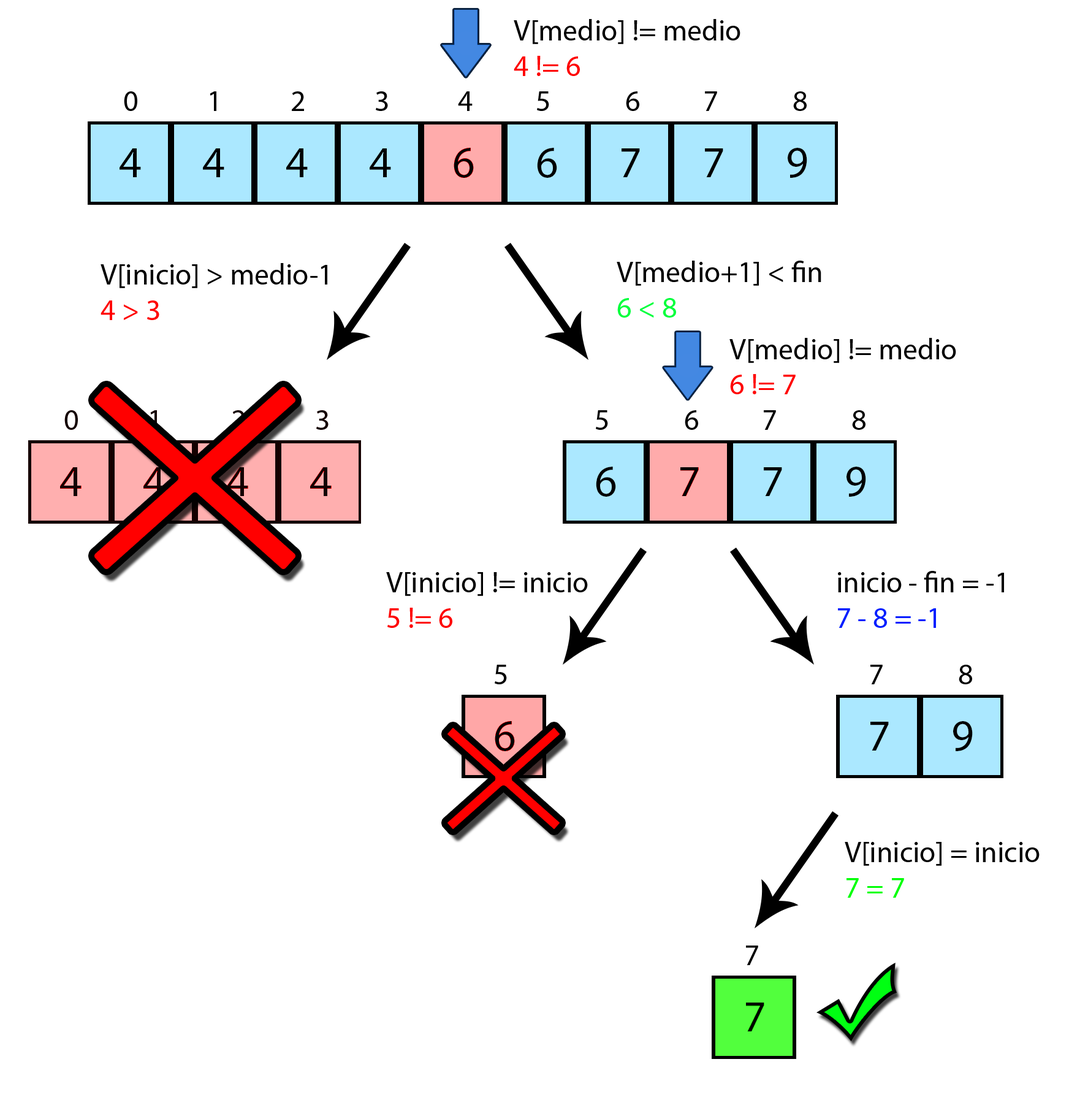
<style>
.page{position:relative;width:1069px;height:1116px;background:#ffffff}
.page>*{position:absolute;margin:0}
.t1{font:29.4px "MyriadPro-Regular";color:#000000}
.t2{font:29.4px "MyriadPro-Regular";color:#fe0000}
.t3{font:29.4px "MyriadPro-Regular";color:#00ff3c}
.t4{font:29.4px "MyriadPro-Regular";color:#ff0000}
.t5{font:29.4px "MyriadPro-Regular";color:#001eff}
.t6{font:29.4px "MyriadPro-Regular";color:#00ff06}
</style>
<div class="page">
<p class="t1" style="left:514px;top:19px;width:226px;height:57px">V[medio] != medio<br><span class="t2">4 != 6</span></p>
<p class="t1" style="left:617px;top:260px;width:204px;height:57px">V[medio+1] &lt; fin<br><span class="t3">6 &lt; 8</span></p>
<p class="t1" style="left:729px;top:338px;width:227px;height:56px">V[medio] != medio<br><span class="t4">6 != 7</span></p>
<p class="t1" style="left:386px;top:572px;width:202px;height:56px">V[inicio] != inicio<br><span class="t2">5 != 6</span></p>
<p class="t1" style="left:838px;top:571px;width:166px;height:57px">inicio - fin = -1<br><span class="t5">7 - 8 = -1</span></p>
<p class="t1" style="left:845px;top:842px;width:195px;height:55px">V[inicio] = inicio<br><span class="t6">7 = 7</span></p>
</div>
